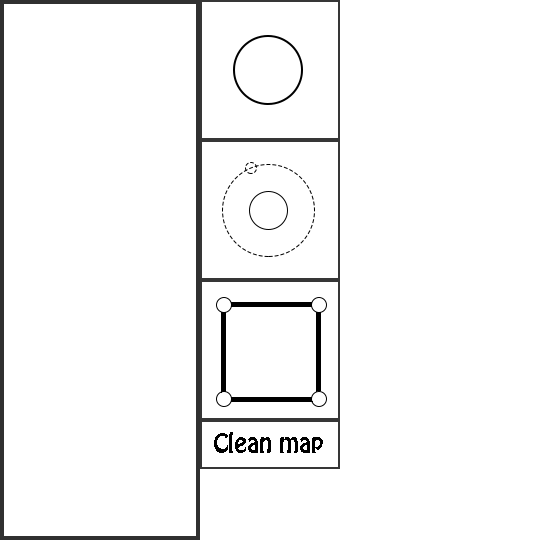
<style>
.page{position:relative;width:540px;height:540px;background:#ffffff}
.page>*{position:absolute;margin:0}
.t1{font:24px "HoboStd";color:#000000}
</style>
<div class="page">
<p class="t1" style="left:214px;top:432px;width:109px;height:21px">Clean map</p>
</div>
